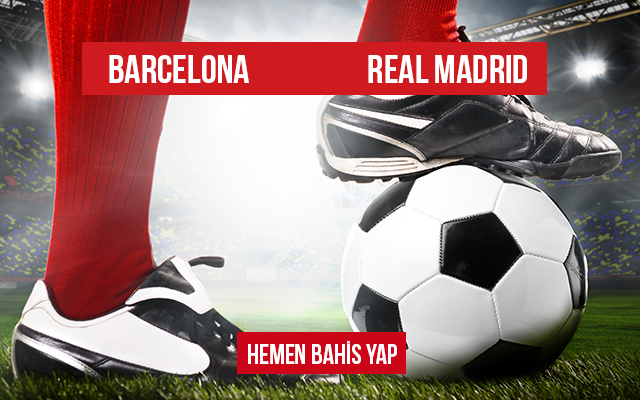
<style>
.page{position:relative;width:640px;height:400px}
.page>*{position:absolute;margin:0}
.t1{font:40px "BebasNeue";color:#ffffff;text-transform:uppercase}
.t2{font:28px "BebasNeue";color:#ffffff;text-transform:uppercase}
</style>
<div class="page">
<p class="t1" style="left:109px;top:55px;width:140px;height:28px">BARCELONA</p>
<p class="t1" style="left:368px;top:55px;width:159px;height:28px">REAL MADRID</p>
<p class="t2" style="left:248px;top:341px;width:149px;height:23px">hemen bahİS YAP</p>
</div>
